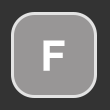
<style>
.page{position:relative;width:110px;height:110px;background:#989696}
.page>*{position:absolute;margin:0}
.t1{font:39.7px "H2gtrE";color:#ffffff}
</style>
<div class="page">
<p class="t1" style="left:43px;top:40px;width:22px;height:31px">F</p>
</div>
